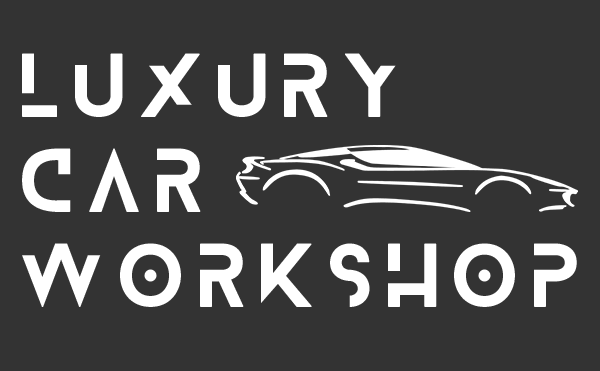
<style>
.page{position:relative;width:600px;height:371px;background:#333333}
.page>*{position:absolute;margin:0}
.t1{font:79.2px "Blanka-Regular";letter-spacing:0.2em;color:#ffffff}
</style>
<div class="page">
<p class="t1" style="left:22px;top:53px;width:555px;height:254px">Luxury <br>car <br>workshop</p>
</div>
